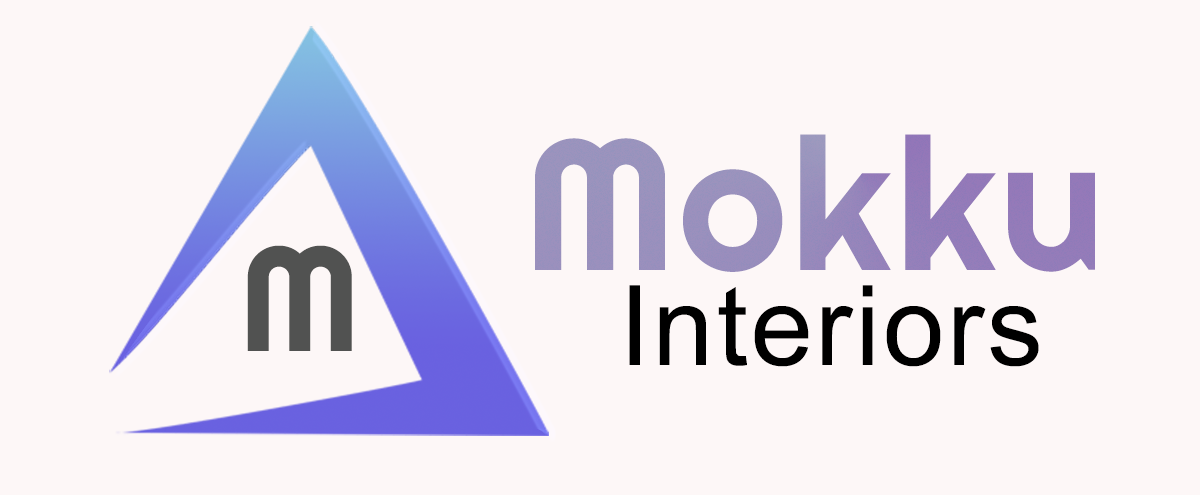
<style>
.page{position:relative;width:1200px;height:495px;background:#fdf7f7}
.page>*{position:absolute;margin:0}
.t1{font:185.3px "Righteous-Regular";letter-spacing:0.025em;color:#978dbc}
.t2{font:148.2px "Righteous-Regular";letter-spacing:0.025em;color:#515251}
.t3{font:111.2px "ArialMT";letter-spacing:0.025em;color:#000000}
</style>
<div class="page">
<p class="t1" style="left:535px;top:134px;width:560px;height:138px">Mokku</p>
<p class="t2" style="left:247px;top:245px;width:105px;height:106px">M</p>
<p class="t3" style="left:629px;top:285px;width:410px;height:82px">Interiors</p>
</div>
